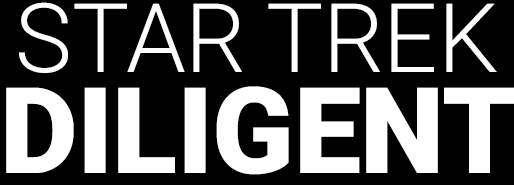
<style>
.page{position:relative;width:514px;height:185px;background:#000000}
.page>*{position:absolute;margin:0}
.t1{font:96px/25.3px "Roboto-Light";letter-spacing:-0.005em;color:#ffffff}
.t2{font:120px/25.3px "Roboto-Black";letter-spacing:-0.005em;color:#ffffff}
</style>
<div class="page">
<p class="t1" style="left:6px;top:2px;width:510px;height:173px;text-align:center">STAR TREK<br><br><br><br><span class="t2">DILIGENT</span></p>
</div>
